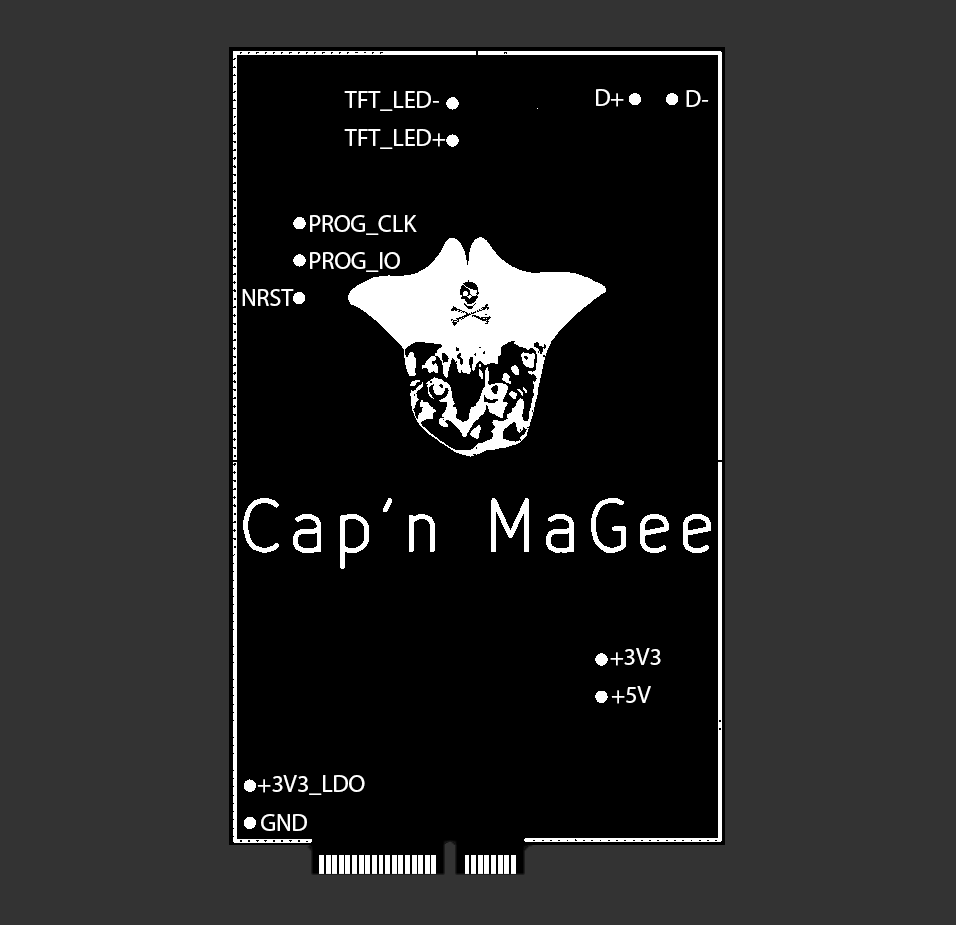
<style>
.page{position:relative;width:956px;height:925px;background:#333333}
.page>*{position:absolute;margin:0}
.t1{font:24px "MyriadPro-Regular";color:#ffffff}
</style>
<div class="page">
<p class="t1" style="left:596px;top:89px;width:28px;height:18px">D+</p>
<p class="t1" style="left:344px;top:91px;width:95px;height:20px">TFT_LED-</p>
<p class="t1" style="left:686px;top:90px;width:23px;height:17px">D-</p>
<p class="t1" style="left:344px;top:129px;width:102px;height:20px">TFT_LED+</p>
<p class="t1" style="left:310px;top:215px;width:107px;height:20px">PROG_CLK</p>
<p class="t1" style="left:310px;top:252px;width:90px;height:20px">PROG_IO</p>
<p class="t1" style="left:242px;top:289px;width:52px;height:17px">NRST</p>
<p class="t1" style="left:610px;top:648px;width:51px;height:18px">+3V3</p>
<p class="t1" style="left:611px;top:686px;width:40px;height:18px">+5V</p>
<p class="t1" style="left:257px;top:775px;width:108px;height:20px">+3V3_LDO</p>
<p class="t1" style="left:261px;top:814px;width:46px;height:17px">GND</p>
</div>
